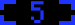
<style>
.page{position:relative;width:75px;height:25px;background:#000000}
.page>*{position:absolute;margin:0}
.t1{font:50px "Thintel";color:#1e33ff}
</style>
<div class="page">
<p class="t1" style="left:31px;top:1px;width:13px;height:22px">5</p>
</div>
